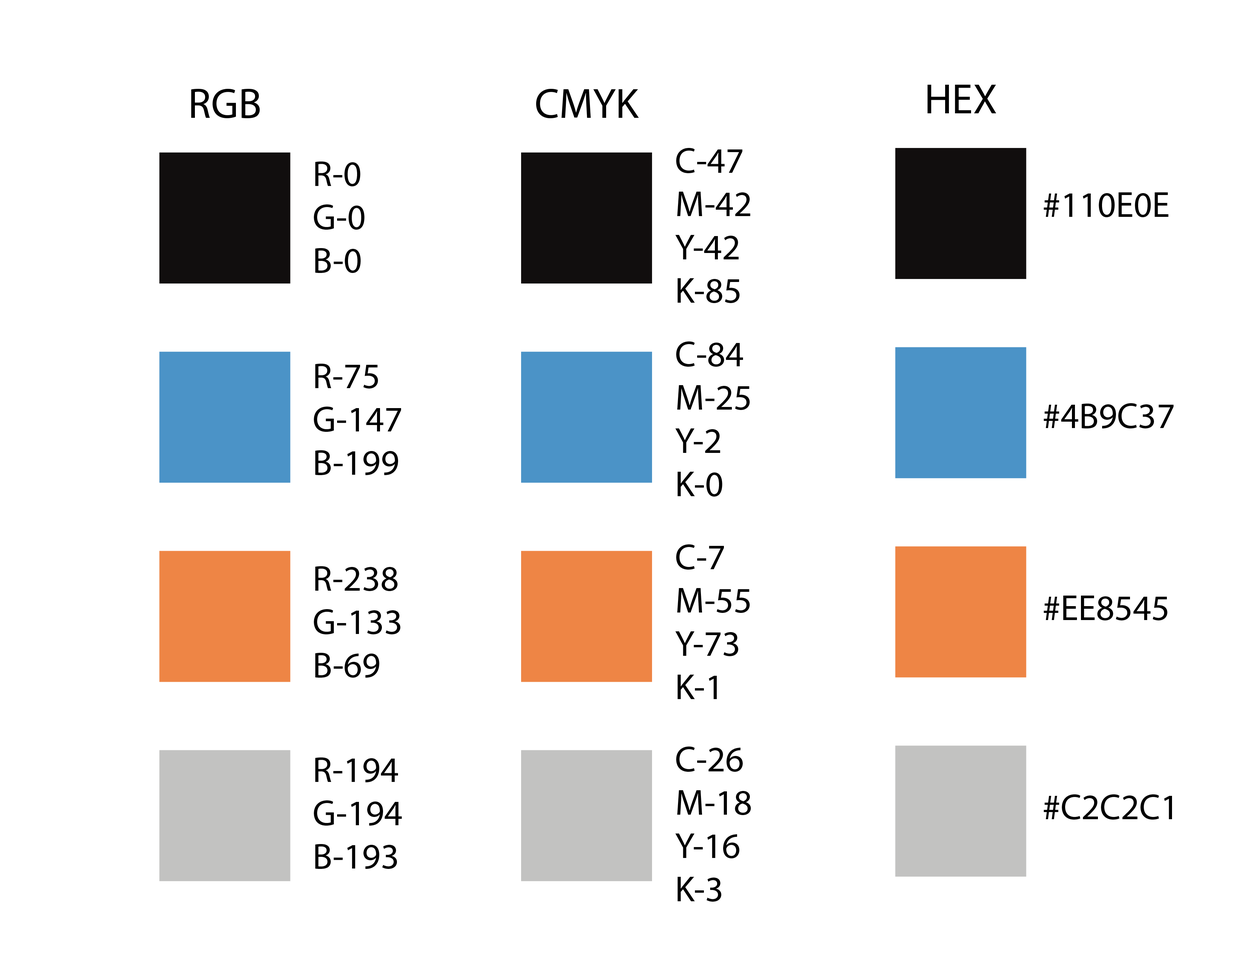
<style>
.page{position:relative;width:1242px;height:960px;background:#ffffff}
.page>*{position:absolute;margin:0}
.t1{font:42.3px "AcuminPro-Regular";color:#000000}
.t2{font:36.1px "AcuminPro-Regular";color:#000000}
</style>
<div class="page">
<p class="t1" style="left:191px;top:88px;width:69px;height:30px">RGB</p>
<p class="t1" style="left:536px;top:88px;width:103px;height:30px">CMYK</p>
<p class="t1" style="left:928px;top:84px;width:69px;height:29px">HEX</p>
<p class="t2" style="left:676px;top:148px;width:74px;height:155px">C-47<br>M-42<br>Y-42<br>K-85</p>
<p class="t2" style="left:314px;top:161px;width:51px;height:112px">R-0<br>G-0<br>B-0</p>
<p class="t2" style="left:1044px;top:192px;width:125px;height:25px">#110E0E</p>
<p class="t2" style="left:676px;top:341px;width:74px;height:155px">C-84<br>M-25<br>Y-2<br>K-0</p>
<p class="t2" style="left:314px;top:364px;width:87px;height:111px">R-75<br>G-147<br>B-199</p>
<p class="t2" style="left:1044px;top:403px;width:130px;height:25px">#4B9C37</p>
<p class="t2" style="left:676px;top:544px;width:74px;height:155px">C-7<br>M-55<br>Y-73<br>K-1</p>
<p class="t2" style="left:314px;top:566px;width:86px;height:111px">R-238<br>G-133<br>B-69</p>
<p class="t2" style="left:1044px;top:595px;width:124px;height:25px">#EE8545</p>
<p class="t2" style="left:676px;top:746px;width:75px;height:155px">C-26<br>M-18<br>Y-16<br>K-3</p>
<p class="t2" style="left:314px;top:757px;width:88px;height:112px">R-194<br>G-194<br>B-193</p>
<p class="t2" style="left:1044px;top:794px;width:128px;height:25px">#C2C2C1</p>
</div>
